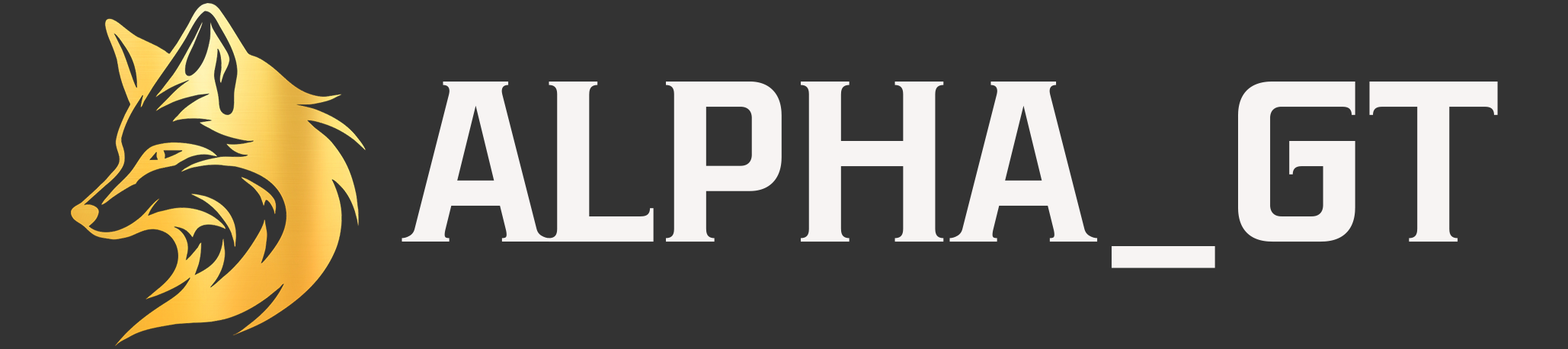
<style>
.page{position:relative;width:1568px;height:349px;background:#333333}
.page>*{position:absolute;margin:0}
.t1{font:228.6px "ARGANDE-Regular";color:#f7f4f3}
</style>
<div class="page">
<p class="t1" style="left:402px;top:82px;width:1096px;height:186px">ALPHA_GT</p>
</div>
